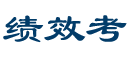
<style>
.page{position:relative;width:131px;height:59px;background:#ffffff}
.page>*{position:absolute;margin:0}
.t1{font:42px "LiSu";color:#023c69}
</style>
<div class="page">
<p class="t1" style="left:3px;top:15px;width:124px;height:28px">绩效考</p>
</div>
